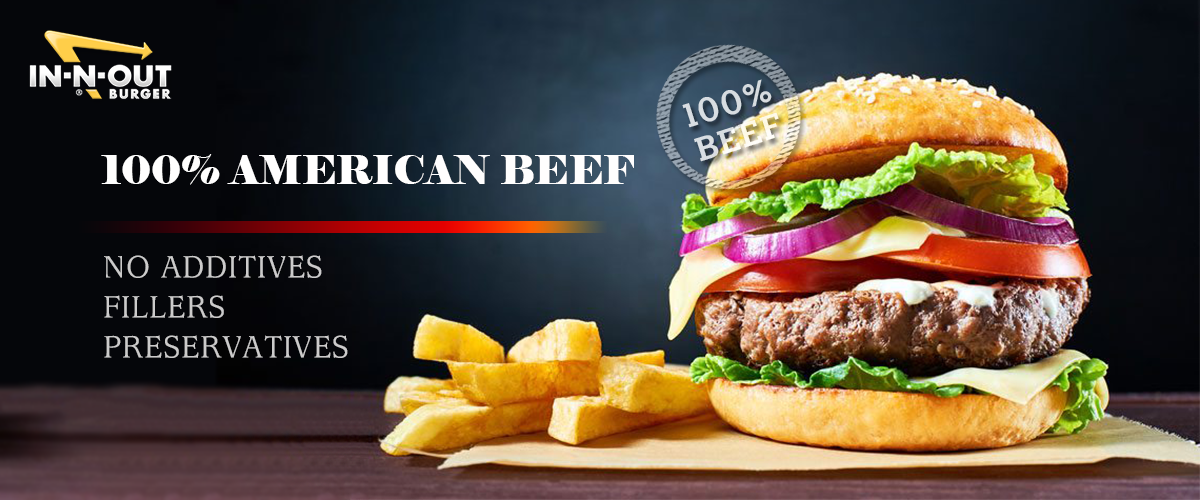
<style>
.page{position:relative;width:1200px;height:500px}
.page>*{position:absolute;margin:0}
.t1{font:40px "Elephant-Regular";letter-spacing:-0.01em;color:#fffefe}
.t2{font:30px/40px "Yj-DWMMOOGJO-Medium";letter-spacing:-0.01em;color:#cccbcb}
</style>
<div class="page">
<p class="t1" style="left:101px;top:154px;width:533px;height:31px">100% AMERICAN BEEF</p>
<p class="t2" style="left:104px;top:255px;width:244px;height:103px">NO ADDITIVES<br>FILLERS<br>PRESERVATIVES</p>
</div>
